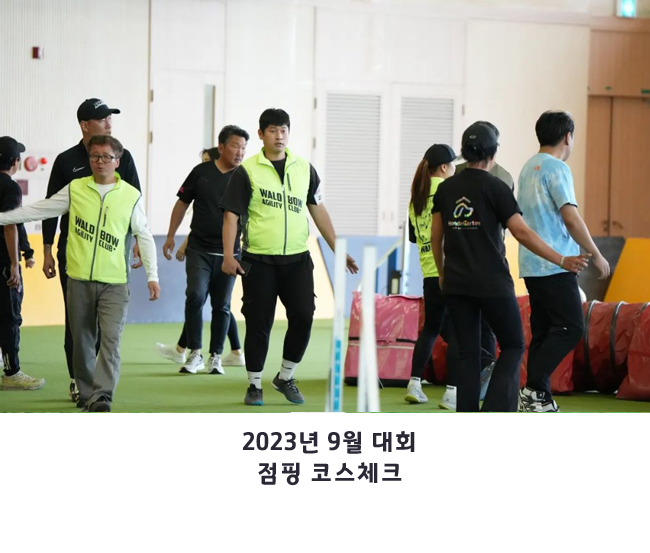
<style>
.page{position:relative;width:650px;height:553px;background:#ffffff}
.page>*{position:absolute;margin:0}
.t1{font:24.8px/31px "GyeonggiTitleV";color:#2b2836;scale:0.95 1}
</style>
<div class="page">
<p class="t1" style="left:243px;top:430px;width:172px;height:56px;text-align:center">2023년 9월 대회<br>점핑 코스체크</p>
</div>
